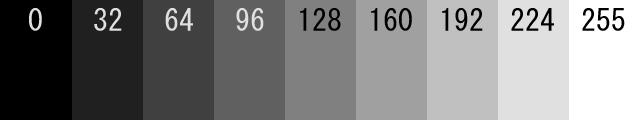
<style>
.page{position:relative;width:640px;height:120px}
.page>*{position:absolute;margin:0}
.t1{font:30px "MS-Gothic";color:#e0e0e0}
.t2{font:30px "MS-Gothic";color:#000000}
</style>
<div class="page">
<p class="t1" style="left:29px;top:8px;width:13px;height:23px">0</p>
<p class="t1" style="left:94px;top:8px;width:28px;height:23px">32</p>
<p class="t1" style="left:165px;top:8px;width:28px;height:23px">64</p>
<p class="t1" style="left:236px;top:8px;width:28px;height:23px">96</p>
<p class="t2" style="left:300px;top:8px;width:41px;height:23px">128</p>
<p class="t2" style="left:371px;top:8px;width:41px;height:23px">160</p>
<p class="t2" style="left:442px;top:8px;width:41px;height:23px">192</p>
<p class="t2" style="left:511px;top:8px;width:43px;height:23px">224</p>
<p class="t2" style="left:582px;top:8px;width:43px;height:23px">255</p>
</div>
